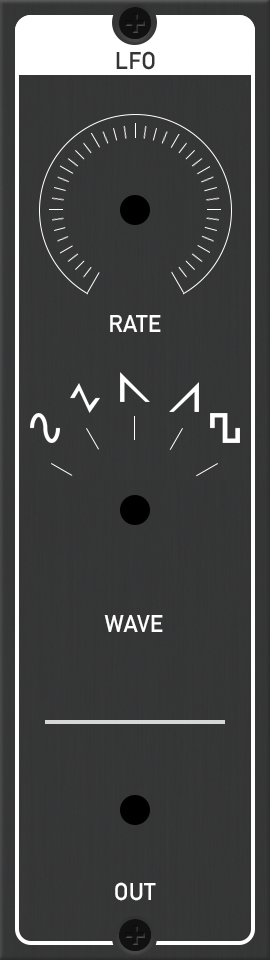
<style>
.page{position:relative;width:270px;height:960px}
.page>*{position:absolute;margin:0}
.t1{font:24px "DINAlternate-Bold";color:#ffffff;font-variant:small-caps}
</style>
<div class="page">
<p class="t1" style="left:110px;top:315px;width:51px;height:17px">RATE</p>
<p class="t1" style="left:104px;top:615px;width:59px;height:17px">WAVE</p>
<p class="t1" style="left:115px;top:882px;width:41px;height:19px">OUT</p>
</div>
